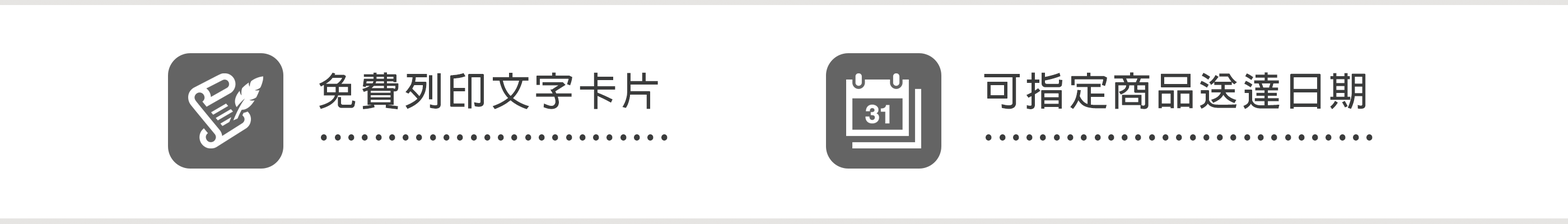
<style>
.page{position:relative;width:1568px;height:224px;background:#ffffff}
.page>*{position:absolute;margin:0}
.t1{font:39.4px "AdobeFanHeitiStd-Bold";letter-spacing:0.1em;color:#3b3c3c}
</style>
<div class="page">
<p class="t1" style="left:319px;top:72px;width:339px;height:38px">免費列印文字卡片</p>
<p class="t1" style="left:984px;top:72px;width:382px;height:37px">可指定商品送達日期</p>
<p class="t1" style="left:321px;top:134px;width:347px;height:7px">..........................</p>
<p class="t1" style="left:986px;top:134px;width:387px;height:7px">.............................</p>
</div>
